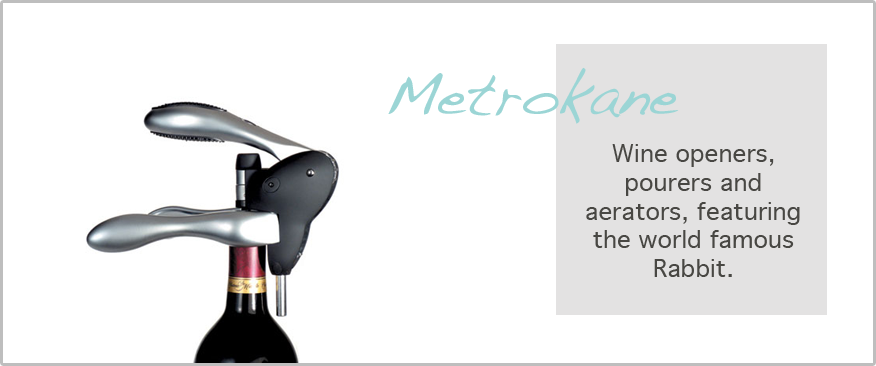
<style>
.page{position:relative;width:876px;height:366px;background:#ffffff}
.page>*{position:absolute;margin:0}
.t1{font:60px "Handwriting-Dakota";color:#9bd5d5}
.t2{font:24px "Geneva";color:#484743}
</style>
<div class="page">
<p class="t1" style="left:388px;top:67px;width:291px;height:57px">Metrokane</p>
<p class="t2" style="left:586px;top:144px;width:214px;height:133px;text-align:center">Wine openers, pourers and<br>aerators, featuring the world famous Rabbit.</p>
</div>
